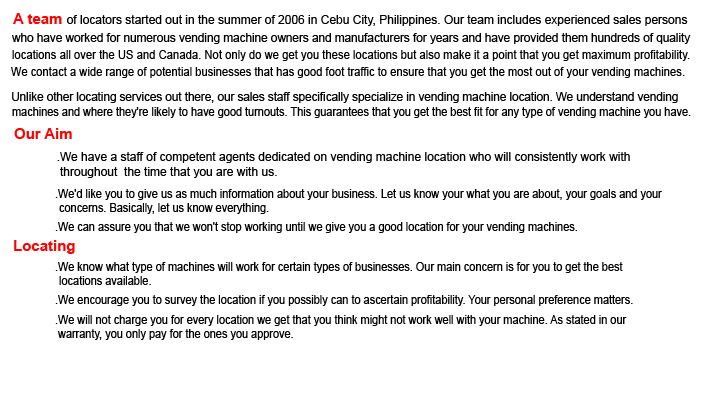
<style>
.page{position:relative;width:705px;height:396px;background:#ffffff}
.page>*{position:absolute;margin:0}
.t1{font:12px "ArialMT";color:#000000}
.t2{font:15px "Arial-BoldMT";color:#ff0000}
.t3{font:12px "ArialMT";color:#000000;scale:0.94 1}
.t4{font:12px "ArialMT";color:#000000;scale:0.93 1}
.t5{font:12px "ArialMT";color:#000000;scale:0.97 1}
.t6{font:12px "ArialMT";color:#000000;scale:0.91 1}
</style>
<div class="page">
<p class="t1" style="left:13px;top:13px;width:675px;height:13px"><span class="t2">A team </span>of locators started out in the summer of 2006 in Cebu City, Philippines. Our team includes experienced sales persons</p>
<p class="t1" style="left:12px;top:33px;width:679px;height:11px">who have worked for numerous vending machine owners and manufacturers for years and have provided them hundreds of quality</p>
<p class="t3" style="left:12px;top:50px;width:678px;height:11px">locations all over the US and Canada. Not only do we get you these locations but also make it a point that you get maximum profitability.</p>
<p class="t4" style="left:11px;top:67px;width:674px;height:11px">We contact a wide range of potential businesses that has good foot traffic to ensure that you get the most out of your vending machines.</p>
<p class="t5" style="left:12px;top:92px;width:666px;height:11px">Unlike other locating services out there, our sales staff specifically specialize in vending machine location. We understand vending</p>
<p class="t6" style="left:12px;top:107px;width:679px;height:11px">machines and where they're likely to have good turnouts. This guarantees that you get the best fit for any type of vending machine you have.</p>
<p class="t2" style="left:14px;top:128px;width:58px;height:11px">Our Aim</p>
<p class="t1" style="left:57px;top:152px;width:573px;height:11px">.We have a staff of competent agents dedicated on vending machine location who will consistently work with</p>
<p class="t1" style="left:60px;top:167px;width:217px;height:11px">throughout  the time that you are with us.</p>
<p class="t6" style="left:55px;top:189px;width:607px;height:11px">.We'd like you to give us as much information about your business. Let us know your what you are about, your goals and your</p>
<p class="t6" style="left:59px;top:203px;width:210px;height:11px">concerns. Basically, let us know everything.</p>
<p class="t6" style="left:55px;top:222px;width:522px;height:11px">.We can assure you that we won't stop working until we give you a good location for your vending machines.</p>
<p class="t2" style="left:14px;top:240px;width:61px;height:14px">Locating</p>
<p class="t6" style="left:55px;top:262px;width:568px;height:11px">.We know what type of machines will work for certain types of businesses. Our main concern is for you to get the best</p>
<p class="t6" style="left:59px;top:276px;width:92px;height:9px">locations available.</p>
<p class="t6" style="left:55px;top:295px;width:578px;height:11px">.We encourage you to survey the location if you possibly can to ascertain profitability. Your personal preference matters.</p>
<p class="t6" style="left:55px;top:315px;width:572px;height:11px">.We will not charge you for every location we get that you think might not work well with your machine. As stated in our</p>
<p class="t6" style="left:57px;top:329px;width:236px;height:11px">warranty, you only pay for the ones you approve.</p>
</div>
